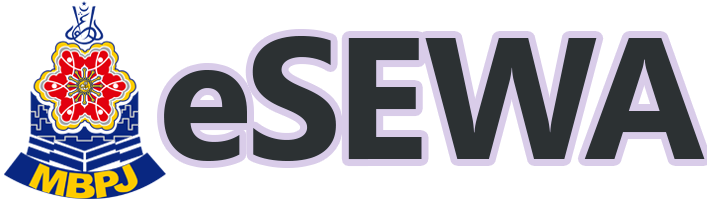
<style>
.page{position:relative;width:707px;height:200px;background:#ffffff}
.page>*{position:absolute;margin:0}
.t1{font:173px "SegoeUI-Bold";letter-spacing:-0.04em;color:#2c3133}
</style>
<div class="page">
<p class="t1" style="left:164px;top:36px;width:541px;height:125px">eSEWA</p>
</div>
